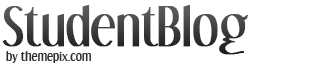
<style>
.page{position:relative;width:326px;height:68px;background:#ffffff}
.page>*{position:absolute;margin:0}
.t1{font:47px "DreamOrphans-Regular";color:#403f3f;font-weight:bold}
.t2{font:12px "DreamOrphanageRg-Regular";color:#2e2e2e}
</style>
<div class="page">
<p class="t1" style="left:2px;top:5px;width:246px;height:50px">StudentBlog</p>
<p class="t2" style="left:6px;top:51px;width:85px;height:12px">by themepix.com</p>
</div>
